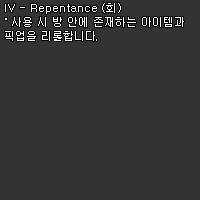
<style>
.page{position:relative;width:200px;height:200px;background:#333333}
.page>*{position:absolute;margin:0}
.t1{font:11px/14px "Dotum";color:#ffffff}
</style>
<div class="page">
<p class="t1" style="left:5px;top:3px;width:179px;height:38px">IV - Repentance (회)<br>˚ 사용 시 방 안에 존재하는 아이템과<br>픽업을 리롤합니다.</p>
</div>
